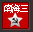
<style>
.page{position:relative;width:33px;height:32px;background:#c50000}
.page>*{position:absolute;margin:0}
.t1{font:10.4px "SimSun";letter-spacing:-0.25em;color:#ffffff}
</style>
<div class="page">
<p class="t1" style="left:4px;top:4px;width:24px;height:9px">南海三</p>
</div>
